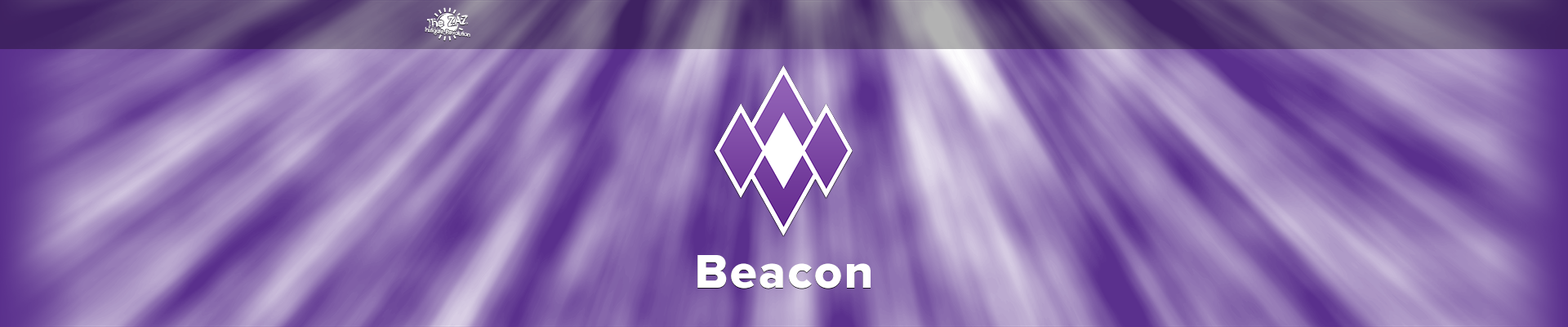
<style>
.page{position:relative;width:1568px;height:327px}
.page>*{position:absolute;margin:0}
.t1{font:49px "ProximaNova-Extrabld";letter-spacing:0.04em;color:#ffffff}
</style>
<div class="page">
<p class="t1" style="left:697px;top:255px;width:174px;height:33px">Beacon</p>
</div>
